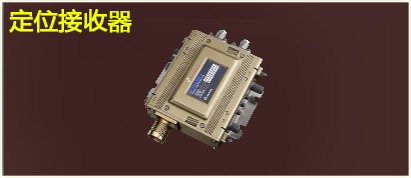
<style>
.page{position:relative;width:411px;height:178px}
.page>*{position:absolute;margin:0}
.t1{font:24px "MicrosoftYaHeiUI";color:#f4ff00;font-weight:bold}
</style>
<div class="page">
<p class="t1" style="left:9px;top:9px;width:123px;height:24px">定位接收器</p>
</div>
